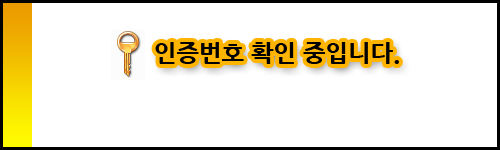
<style>
.page{position:relative;width:500px;height:150px;background:#ffffff}
.page>*{position:absolute;margin:0}
.t1{font:24px "NanumGothicExtraBold";color:#000000}
</style>
<div class="page">
<p class="t1" style="left:155px;top:42px;width:244px;height:22px">인증번호 확인 중입니다.</p>
</div>
